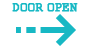
<style>
.page{position:relative;width:91px;height:48px;background:#ffffff}
.page>*{position:absolute;margin:0}
.t1{font:12px "CourierNewPS-BoldMT";color:#17b8c4;font-weight:bold}
</style>
<div class="page">
<p class="t1" style="left:12px;top:3px;width:66px;height:9px">DOOR OPEN</p>
</div>
